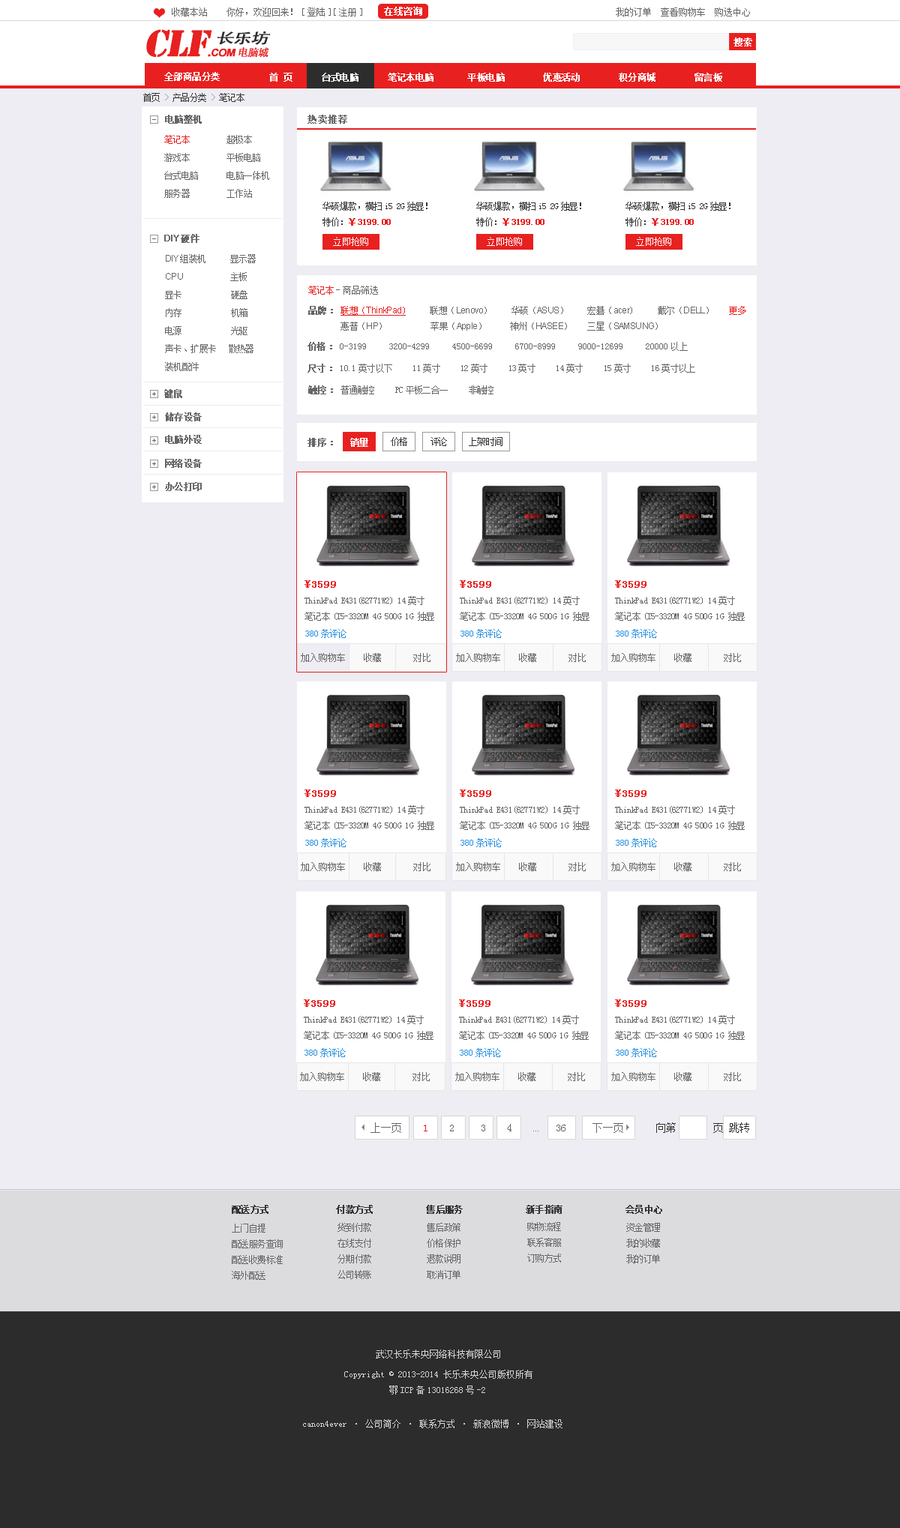
<style>
.page{position:relative;width:900px;height:1528px;background:#eeedf3}
.page>*{position:absolute;margin:0}
.t1{font:9px "SimSun";color:#666666}
.t2{font:9px "SimSun";color:#ffffff;font-weight:bold}
.t3{font:34.5px "StencilStd";letter-spacing:-0.05em;color:#e82020;font-weight:bold;font-style:italic}
.t4{font:10.5px "StencilStd";letter-spacing:-0.05em;color:#e82020;font-weight:bold;font-style:italic}
.t5{font:10.5px "Arial-BoldMT";letter-spacing:-0.05em;color:#e82020;font-weight:bold;font-style:italic}
.t6{font:10.5px "AdobeHeitiStd-Regular";letter-spacing:-0.05em;color:#e82020;font-weight:bold;font-style:italic}
.t7{font:14.2px "AdobeHeitiStd-Regular";letter-spacing:-0.05em;color:#2d2d2d;font-weight:bold;font-style:italic;scale:1.26 1}
.t8{font:9px "SimSun";letter-spacing:-0.05em;color:#ffffff;font-weight:bold}
.t9{font:9px "SimSun";letter-spacing:-0.05em;color:#333333}
.t10{font:9px "SimSun";letter-spacing:-0.05em;color:#999999}
.t11{font:9px "SimSun";letter-spacing:-0.05em;color:#666666;font-weight:bold}
.t12{font:9px "SimSun";letter-spacing:0.05em;color:#666666;font-weight:bold}
.t13{font:9px/18px "SimSun";letter-spacing:-0.05em;color:#666666}
.t14{font:9px/18px "SimSun";letter-spacing:-0.05em;color:#e82020}
.t15{font:9px "SimSun";letter-spacing:-0.05em;color:#e82020;font-weight:bold}
.t16{font:9px "ArialMT";letter-spacing:-0.05em;color:#666666;font-weight:bold}
.t17{font:9px "SimSun";color:#ffffff}
.t18{font:9px/18px "ArialMT";letter-spacing:-0.05em;color:#666666}
.t19{font:9px "SimSun";letter-spacing:-0.05em;color:#e82020}
.t20{font:9px "SimSun";letter-spacing:-0.05em;color:#666666}
.t21{font:9px "SimSun";letter-spacing:-0.05em;color:#e82020;text-decoration:underline}
.t22{font:9px "ArialMT";letter-spacing:-0.05em;color:#e82020;text-decoration:underline}
.t23{font:9px "ArialMT";letter-spacing:-0.05em;color:#666666}
.t24{font:7.5px "SimSun";letter-spacing:-0.05em;color:#666666}
.t25{font:9px "SimSun";color:#666666;font-weight:bold}
.t26{font:10.5px "SimSun";letter-spacing:0.05em;color:#e82020;font-weight:bold}
.t27{font:9px "SimSun";color:#218de0}
.t28{font:9px "SimSun";letter-spacing:-0.05em;color:#218de0}
.t29{font:10.5px "SimSun";color:#666666}
.t30{font:10.5px "SimSun";color:#333333}
.t31{font:10.5px "SimSun";color:#e82020}
.t32{font:4.5px "SimSun";color:#666666}
.t33{font:9px "SimSun";letter-spacing:-0.05em;color:#333333;font-weight:bold}
.t34{font:9px "SimSun";color:#d4d4d4}
.t35{font:13.5px "MicrosoftYaHei";color:#ffffff;font-weight:bold}
</style>
<div class="page">
<p class="t1" style="left:172px;top:8px;width:35px;height:8px">收藏本站</p>
<p class="t1" style="left:226px;top:8px;width:524px;height:8px">你好，欢迎回来！[登陆][注册]                                                        我的订单  查看购物车  购选中心</p>
<p class="t2" style="left:384px;top:7px;width:38px;height:9px">在线咨询</p>
<p class="t3" style="left:146px;top:29px;width:123px;height:29px">CLF<span class="t4">.</span><span class="t5">COM</span><span class="t6">电脑城</span></p>
<p class="t7" style="left:218px;top:31px;width:53px;height:14px">长乐坊</p>
<p class="t2" style="left:734px;top:38px;width:18px;height:8px">搜索</p>
<p class="t8" style="left:164px;top:72px;width:56px;height:9px">全部商品分类</p>
<p class="t8" style="left:269px;top:73px;width:453px;height:9px">首 页      台式电脑      笔记本电脑       平板电脑        优惠活动        积分商城        留言板</p>
<p class="t9" style="left:143px;top:93px;width:101px;height:9px">首页 <span class="t10">&gt;</span> 产品分类 <span class="t10">&gt;</span> 笔记本</p>
<p class="t11" style="left:165px;top:115px;width:37px;height:9px">电脑整机</p>
<p class="t12" style="left:308px;top:115px;width:39px;height:9px">热卖推荐</p>
<p class="t13" style="left:164px;top:135px;width:105px;height:63px"><span class="t14">笔记本</span>         超极本<br>游戏本         平板电脑<br>台式电脑       电脑一体机<br>服务器         工作站</p>
<p class="t9" style="left:322px;top:202px;width:106px;height:9px">华硕爆款，横扫i5 2G独显！</p>
<p class="t9" style="left:476px;top:202px;width:105px;height:9px">华硕爆款，横扫i5 2G独显！</p>
<p class="t9" style="left:626px;top:202px;width:104px;height:9px">华硕爆款，横扫i5 2G独显！</p>
<p class="t15" style="left:322px;top:218px;width:69px;height:8px"><span class="t9">特价：</span>￥3199.00</p>
<p class="t15" style="left:476px;top:218px;width:68px;height:8px"><span class="t9">特价：</span>￥3199.00</p>
<p class="t15" style="left:626px;top:218px;width:68px;height:8px"><span class="t9">特价：</span>￥3199.00</p>
<p class="t16" style="left:164px;top:234px;width:36px;height:9px">DIY<span class="t11">硬件</span></p>
<p class="t17" style="left:333px;top:237px;width:35px;height:9px">立即抢购</p>
<p class="t17" style="left:487px;top:237px;width:35px;height:9px">立即抢购</p>
<p class="t17" style="left:636px;top:237px;width:35px;height:9px">立即抢购</p>
<p class="t13" style="left:165px;top:254px;width:91px;height:117px"><span class="t18">DIY</span>组装机      显示器<br><span class="t18">CPU                          </span>主板<br>显卡            硬盘<br>内存            机箱<br>电源            光驱<br>声卡、扩展卡   散热器<br>装机配件</p>
<p class="t1" style="left:308px;top:286px;width:70px;height:9px"><span class="t19">笔记本</span><span class="t20">-</span>商品筛选</p>
<p class="t20" style="left:308px;top:306px;width:438px;height:25px"><span class="t11">品牌：</span><span class="t21">联想（</span><span class="t22">ThinkPad</span><span class="t21">)</span>      联想（<span class="t23">Lenovo</span>）      华硕（<span class="t23">ASUS</span>）      宏碁（<span class="t23">acer</span>)      戴尔（<span class="t23">DELL</span>）     <span class="t19">更多<br></span>        惠普（<span class="t23">HP</span>）            苹果（<span class="t23">Apple</span>）       神州（<span class="t23">HASEE</span>）     三星（<span class="t23">SAMSUNG</span>）</p>
<p class="t1" style="left:308px;top:342px;width:380px;height:9px"><span class="t11">价格：</span>0-3199     3200-4299     4500-6699     6700-8999     9000-12699     20000以上</p>
<p class="t20" style="left:308px;top:364px;width:387px;height:9px"><span class="t11">尺寸：</span>10.1英寸以下     11英寸     12英寸     13英寸     14英寸     15英寸     16英寸以上</p>
<p class="t11" style="left:164px;top:389px;width:18px;height:9px">键鼠</p>
<p class="t20" style="left:308px;top:386px;width:186px;height:8px"><span class="t11">触控：</span>普通触控     PC平板二合一     非触控</p>
<p class="t24" style="left:152px;top:392px;width:4px;height:4px">+</p>
<p class="t11" style="left:165px;top:412px;width:37px;height:10px">储存设备</p>
<p class="t24" style="left:152px;top:416px;width:4px;height:3px">+</p>
<p class="t11" style="left:165px;top:435px;width:37px;height:9px">电脑外设</p>
<p class="t25" style="left:308px;top:438px;width:25px;height:9px">排序：</p>
<p class="t8" style="left:350px;top:438px;width:18px;height:9px">销量</p>
<p class="t9" style="left:391px;top:437px;width:16px;height:9px">价格</p>
<p class="t9" style="left:430px;top:437px;width:17px;height:9px">评论</p>
<p class="t9" style="left:469px;top:437px;width:33px;height:9px">上架时间</p>
<p class="t24" style="left:152px;top:439px;width:4px;height:3px">+</p>
<p class="t24" style="left:152px;top:462px;width:4px;height:4px">+</p>
<p class="t11" style="left:165px;top:459px;width:37px;height:9px">网络设备</p>
<p class="t24" style="left:152px;top:485px;width:4px;height:4px">+</p>
<p class="t11" style="left:165px;top:482px;width:37px;height:9px">办公打印</p>
<p class="t26" style="left:304px;top:580px;width:32px;height:8px">¥3599</p>
<p class="t26" style="left:460px;top:580px;width:31px;height:8px">¥3599</p>
<p class="t26" style="left:615px;top:580px;width:31px;height:8px">¥3599</p>
<p class="t20" style="left:304px;top:596px;width:130px;height:25px">ThinkPad E431(62771W2) 14英寸 <br>笔记本(I5-3320M 4G 500G 1G 独显</p>
<p class="t20" style="left:460px;top:596px;width:130px;height:25px">ThinkPad E431(62771W2) 14英寸 <br>笔记本(I5-3320M 4G 500G 1G 独显</p>
<p class="t20" style="left:615px;top:596px;width:130px;height:25px">ThinkPad E431(62771W2) 14英寸 <br>笔记本(I5-3320M 4G 500G 1G 独显</p>
<p class="t27" style="left:305px;top:629px;width:41px;height:9px">380<span class="t28">条评论</span></p>
<p class="t27" style="left:460px;top:629px;width:42px;height:9px">380<span class="t28">条评论</span></p>
<p class="t27" style="left:616px;top:629px;width:41px;height:9px">380<span class="t28">条评论</span></p>
<p class="t1" style="left:301px;top:653px;width:129px;height:9px">加入购物车    收藏       对比</p>
<p class="t1" style="left:456px;top:653px;width:130px;height:9px">加入购物车    收藏       对比</p>
<p class="t1" style="left:611px;top:653px;width:130px;height:9px">加入购物车    收藏       对比</p>
<p class="t26" style="left:304px;top:790px;width:32px;height:7px">¥3599</p>
<p class="t26" style="left:460px;top:790px;width:31px;height:7px">¥3599</p>
<p class="t26" style="left:615px;top:790px;width:31px;height:7px">¥3599</p>
<p class="t20" style="left:304px;top:806px;width:130px;height:24px">ThinkPad E431(62771W2) 14英寸 <br>笔记本(I5-3320M 4G 500G 1G 独显</p>
<p class="t20" style="left:460px;top:806px;width:130px;height:24px">ThinkPad E431(62771W2) 14英寸 <br>笔记本(I5-3320M 4G 500G 1G 独显</p>
<p class="t20" style="left:615px;top:806px;width:130px;height:24px">ThinkPad E431(62771W2) 14英寸 <br>笔记本(I5-3320M 4G 500G 1G 独显</p>
<p class="t27" style="left:305px;top:838px;width:41px;height:10px">380<span class="t28">条评论</span></p>
<p class="t27" style="left:460px;top:838px;width:42px;height:10px">380<span class="t28">条评论</span></p>
<p class="t27" style="left:616px;top:838px;width:41px;height:10px">380<span class="t28">条评论</span></p>
<p class="t1" style="left:301px;top:862px;width:129px;height:10px">加入购物车    收藏       对比</p>
<p class="t1" style="left:456px;top:862px;width:130px;height:10px">加入购物车    收藏       对比</p>
<p class="t1" style="left:611px;top:862px;width:130px;height:10px">加入购物车    收藏       对比</p>
<p class="t26" style="left:304px;top:1000px;width:31px;height:7px">¥3599</p>
<p class="t26" style="left:459px;top:1000px;width:31px;height:7px">¥3599</p>
<p class="t26" style="left:615px;top:1000px;width:31px;height:7px">¥3599</p>
<p class="t20" style="left:304px;top:1016px;width:130px;height:24px">ThinkPad E431(62771W2) 14英寸 <br>笔记本(I5-3320M 4G 500G 1G 独显</p>
<p class="t20" style="left:459px;top:1016px;width:130px;height:24px">ThinkPad E431(62771W2) 14英寸 <br>笔记本(I5-3320M 4G 500G 1G 独显</p>
<p class="t20" style="left:615px;top:1016px;width:130px;height:24px">ThinkPad E431(62771W2) 14英寸 <br>笔记本(I5-3320M 4G 500G 1G 独显</p>
<p class="t27" style="left:304px;top:1048px;width:42px;height:10px">380<span class="t28">条评论</span></p>
<p class="t27" style="left:460px;top:1048px;width:41px;height:10px">380<span class="t28">条评论</span></p>
<p class="t27" style="left:616px;top:1048px;width:41px;height:10px">380<span class="t28">条评论</span></p>
<p class="t1" style="left:300px;top:1072px;width:130px;height:10px">加入购物车    收藏       对比</p>
<p class="t1" style="left:455px;top:1072px;width:130px;height:10px">加入购物车    收藏       对比</p>
<p class="t1" style="left:611px;top:1072px;width:130px;height:10px">加入购物车    收藏       对比</p>
<p class="t29" style="left:370px;top:1123px;width:31px;height:10px">上一页</p>
<p class="t30" style="left:424px;top:1123px;width:325px;height:10px"><span class="t31">1</span><span class="t29">    2     3    4    </span><span class="t32">...</span><span class="t29">   36     下一页      </span>向第       页 跳转</p>
<p class="t33" style="left:232px;top:1205px;width:430px;height:9px">配送方式              付款方式           售后服务             新手指南             会员中心</p>
<p class="t20" style="left:232px;top:1224px;width:51px;height:56px">上门自提<br>配送服务查询<br>配送收费标准<br>海外配送</p>
<p class="t20" style="left:338px;top:1223px;width:33px;height:57px">货到付款<br>在线支付<br>分期付款<br>公司转账</p>
<p class="t20" style="left:427px;top:1223px;width:33px;height:57px">售后政策<br>价格保护<br>退款说明<br>取消订单</p>
<p class="t20" style="left:527px;top:1222px;width:34px;height:41px">购物流程<br>联系客服<br>订购方式</p>
<p class="t20" style="left:626px;top:1223px;width:34px;height:41px">资金管理<br>我的收藏<br>我的订单</p>
<p class="t34" style="left:344px;top:1350px;width:188px;height:45px"><span class="t35">                         </span>武汉长乐未央网络科技有限公司<br>                  Copyright © 2013-2014 长乐未央公司版权所有<br>                            鄂ICP备13016268号-2</p>
<p class="t34" style="left:303px;top:1420px;width:259px;height:9px"><span class="t35">              </span>canon4ever · 公司简介 · 联系方式 · 新浪微博 · 网站建设</p>
</div>
